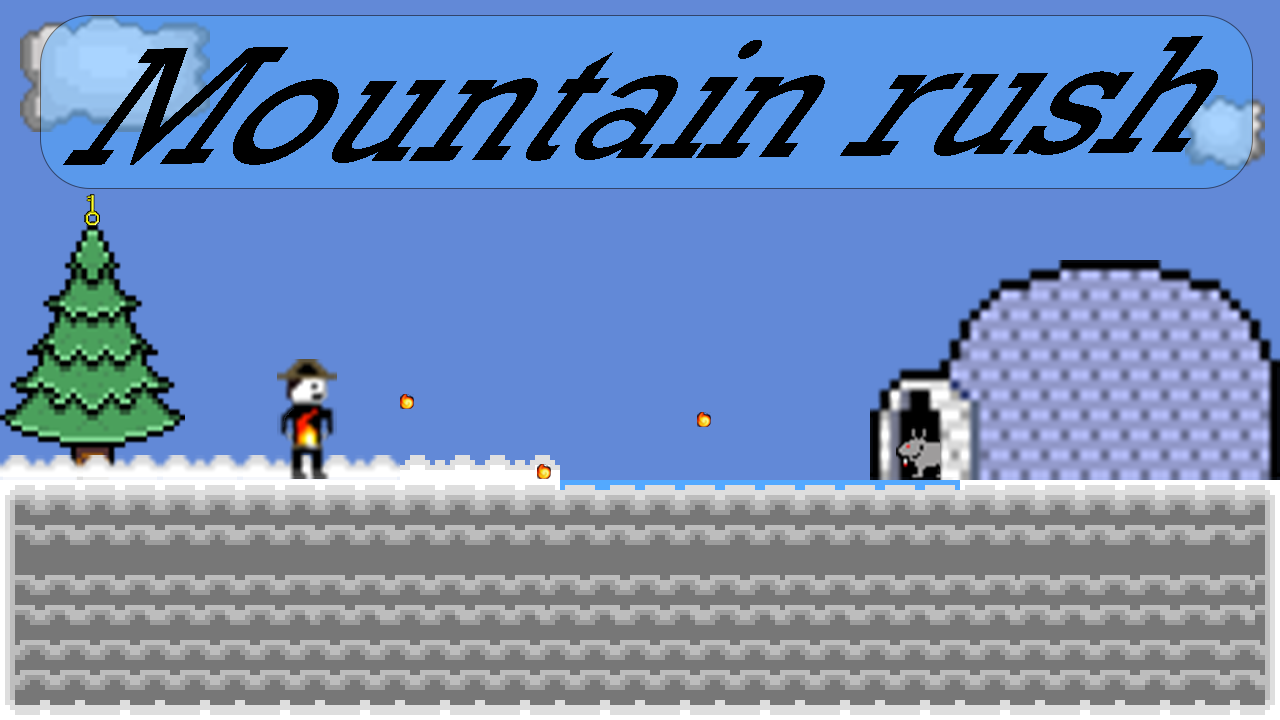
<style>
.page{position:relative;width:1280px;height:720px;background:#6289d7}
.page>*{position:absolute;margin:0}
.t1{font:196.2px "RockwellNova";color:#000000;scale:0.8 1}
</style>
<div class="page">
<p class="t1" style="left:63px;top:36px;width:1155px;height:129px;rotate:-1deg">Mountain rush</p>
</div>
